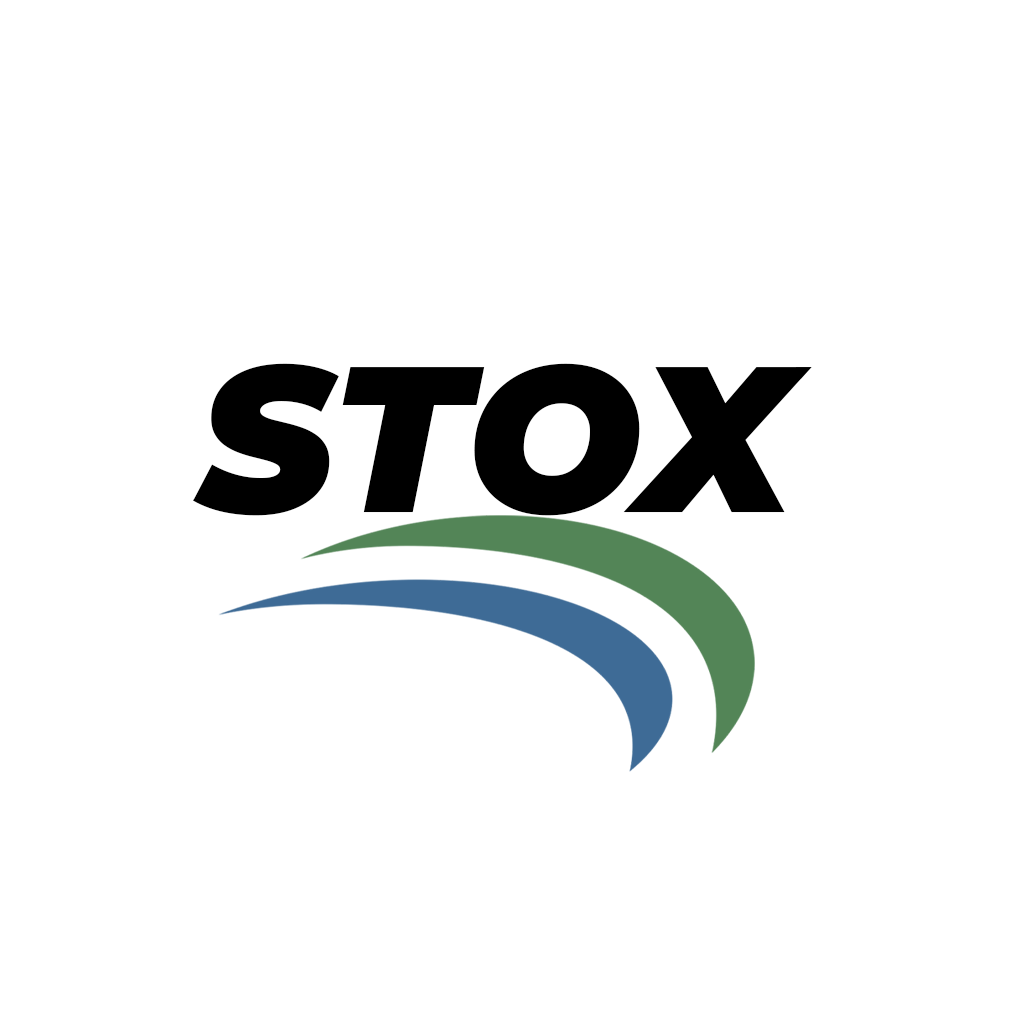
<style>
.page{position:relative;width:1024px;height:1024px;background:#ffffff}
.page>*{position:absolute;margin:0}
.t1{font:207.5px "Montserrat-BlackItalic";color:#000000}
</style>
<div class="page">
<p class="t1" style="left:193px;top:363px;width:619px;height:153px">STOX</p>
</div>
